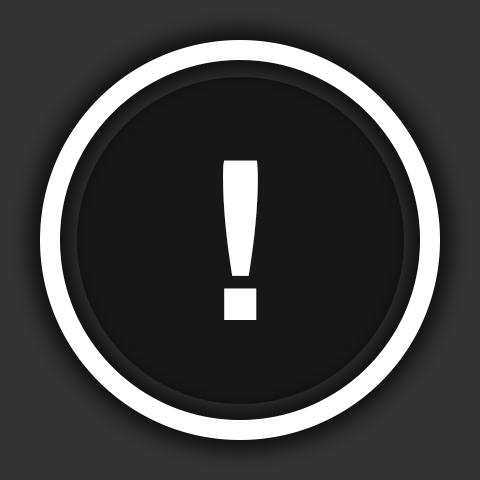
<style>
.page{position:relative;width:480px;height:480px;background:#171717}
.page>*{position:absolute;margin:0}
.t1{font:240px "CoolveticaRg-Regular";letter-spacing:0.01em;color:#ffffff}
</style>
<div class="page">
<p class="t1" style="left:223px;top:160px;width:35px;height:160px">!</p>
</div>
